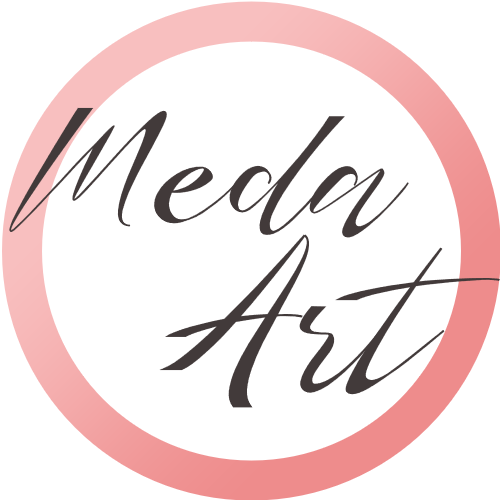
<style>
.page{position:relative;width:500px;height:500px;background:#ffffff}
.page>*{position:absolute;margin:0}
.t1{font:207.8px "Herdrey";color:#423a3a}
.t2{font:262.9px "Herdrey";color:#423a3a}
</style>
<div class="page">
<p class="t1" style="left:9px;top:107px;width:400px;height:131px">Meda</p>
<p class="t2" style="left:159px;top:234px;width:341px;height:174px">Art</p>
</div>
